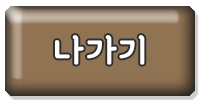
<style>
.page{position:relative;width:200px;height:100px;background:#907353}
.page>*{position:absolute;margin:0}
.t1{font:50px "YanoljaYacheR";color:#ffffff}
</style>
<div class="page">
<p class="t1" style="left:55px;top:35px;width:90px;height:30px">나가기</p>
</div>
